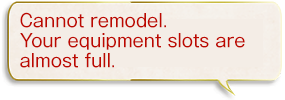
<style>
.page{position:relative;width:285px;height:100px;background:#f4ede6}
.page>*{position:absolute;margin:0}
.t1{font:18px/20px "GothicMB101Pro-Regular";color:#bd0800}
</style>
<div class="page">
<p class="t1" style="left:20px;top:12px;width:225px;height:56px">Cannot remodel.<br>Your equipment slots are<br>almost full.</p>
</div>
